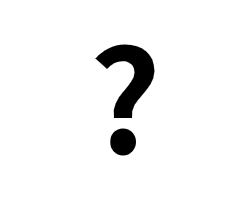
<style>
.page{position:relative;width:250px;height:200px;background:#ffffff}
.page>*{position:absolute;margin:0}
.t1{font:141px "SourceHanSansSC-Bold";color:#000000}
</style>
<div class="page">
<p class="t1" style="left:95px;top:44px;width:60px;height:112px">?</p>
</div>
